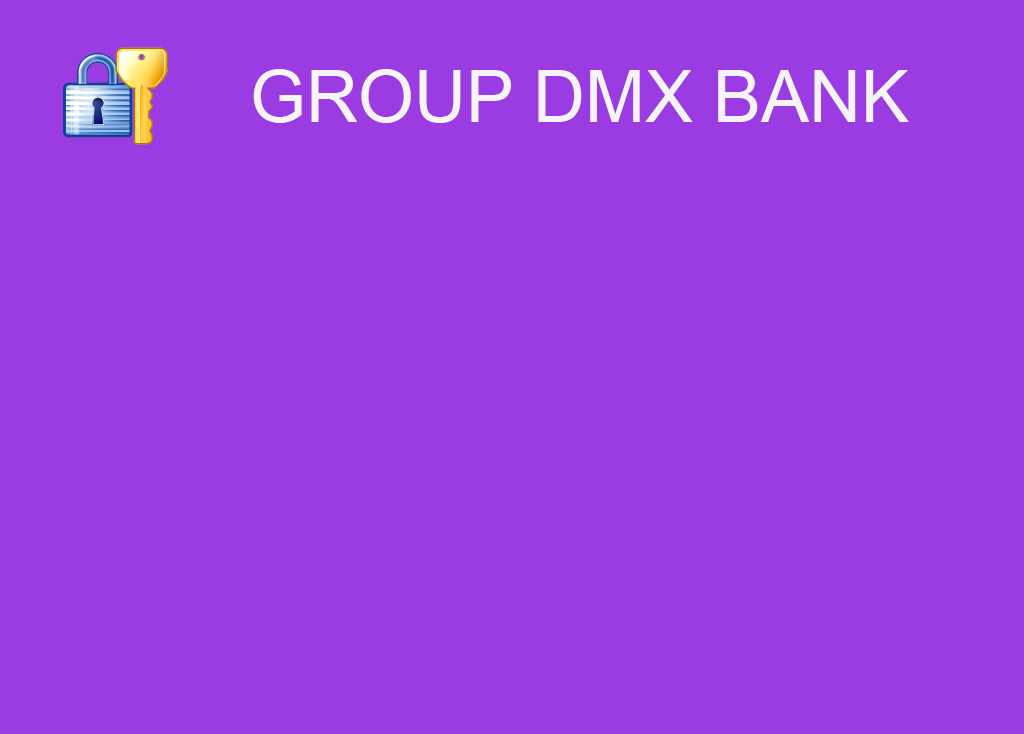
<style>
.page{position:relative;width:1024px;height:734px;background:#9b3ce2}
.page>*{position:absolute;margin:0}
.t1{font:72px "ArialMT";color:#f7f4f9}
</style>
<div class="page">
<p class="t1" style="left:253px;top:69px;width:656px;height:54px">GROUP DMX BANK</p>
</div>
